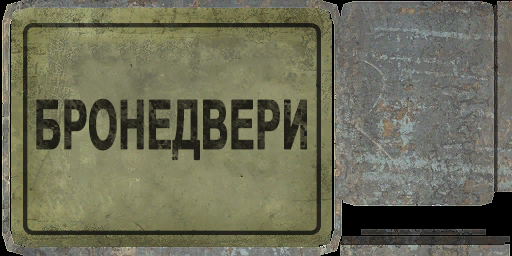
<style>
.page{position:relative;width:512px;height:256px}
.page>*{position:absolute;margin:0}
.t1{font:67.6px "Arial-BoldMT";color:#1d1c15;font-weight:bold;scale:0.56 1}
</style>
<div class="page">
<p class="t1" style="left:36px;top:98px;width:271px;height:63px">БРОНЕДВЕРИ</p>
</div>
